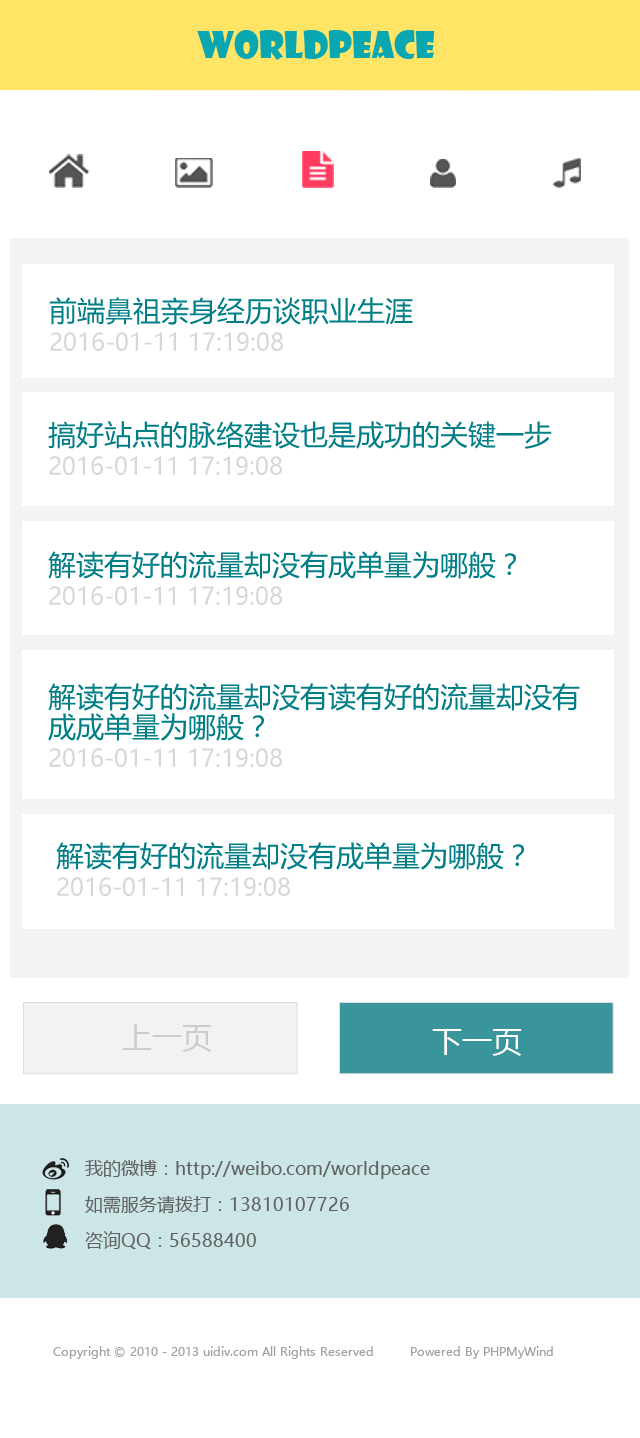
<style>
.page{position:relative;width:640px;height:1438px;background:#ffffff}
.page>*{position:absolute;margin:0}
.t1{font:36px "ShowcardGothic-Reg";color:#0ba7b1}
.t2{font:24px/30px "MicrosoftYaHei";color:#d7d7d7}
.t3{font:28px/30px "MicrosoftYaHei";color:#007e86}
.t4{font:30px "MicrosoftYaHei";color:#cccccc}
.t5{font:30px "MicrosoftYaHei";color:#ffffff}
.t6{font:18px/36px "MicrosoftYaHei";color:#616161}
.t7{font:12px "MicrosoftYaHei";color:#a2a2a2}
</style>
<div class="page">
<p class="t1" style="left:197px;top:30px;width:238px;height:30px">worldpeace</p>
<p class="t2" style="left:49px;top:297px;width:364px;height:54px"><span class="t3">前端鼻祖亲身经历谈职业生涯  <br></span>2016-01-11 17:19:08</p>
<p class="t2" style="left:48px;top:421px;width:504px;height:54px"><span class="t3">搞好站点的脉络建设也是成功的关键一步<br></span>2016-01-11 17:19:08</p>
<p class="t2" style="left:48px;top:551px;width:468px;height:54px"><span class="t3">解读有好的流量却没有成单量为哪般？<br></span>2016-01-11 17:19:08</p>
<p class="t3" style="left:48px;top:683px;width:532px;height:84px">解读有好的流量却没有读有好的流量却没有<br>成成单量为哪般？<br><span class="t2">2016-01-11 17:19:08</span></p>
<p class="t2" style="left:56px;top:842px;width:468px;height:54px"><span class="t3">解读有好的流量却没有成单量为哪般？<br></span>2016-01-11 17:19:08</p>
<p class="t4" style="left:122px;top:1024px;width:90px;height:28px">上一页</p>
<p class="t5" style="left:432px;top:1029px;width:90px;height:27px">下一页</p>
<p class="t6" style="left:85px;top:1160px;width:345px;height:89px">我的微博：http://weibo.com/worldpeace            <br>如需服务请拨打：13810107726        <br>咨询QQ：56588400</p>
<p class="t7" style="left:53px;top:1346px;width:500px;height:13px">Copyright © 2010 - 2013 uidiv.com All Rights Reserved         Powered By PHPMyWind</p>
</div>
